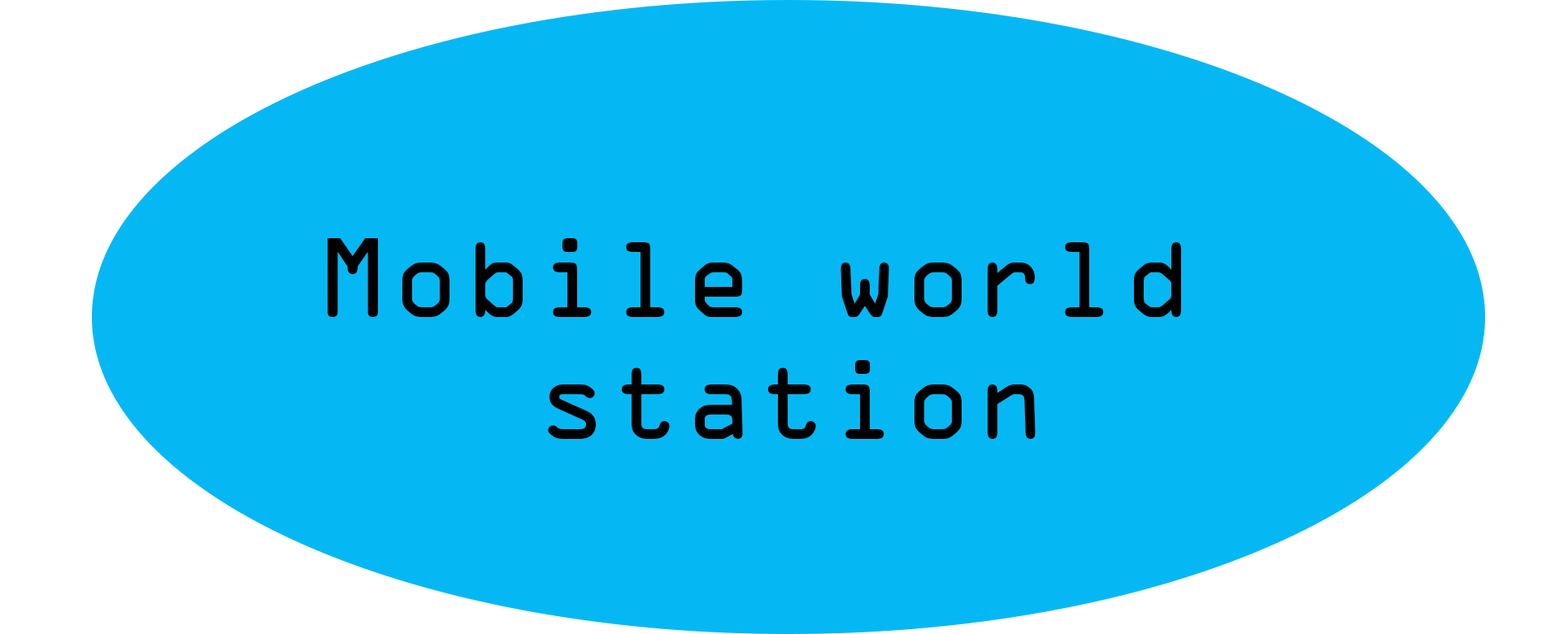
<style>
.page{position:relative;width:1568px;height:634px;background:#05b8f3}
.page>*{position:absolute;margin:0}
.t1{font:101.6px "OCRAStd";color:#000000}
</style>
<div class="page">
<p class="t1" style="left:328px;top:238px;width:853px;height:201px">Mobile world <br>   station</p>
</div>
